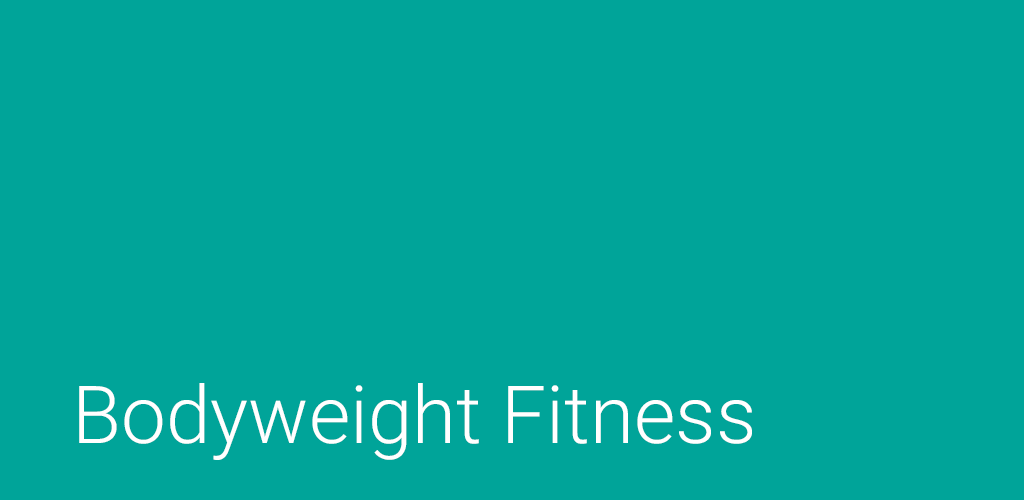
<style>
.page{position:relative;width:1024px;height:500px;background:#00a499}
.page>*{position:absolute;margin:0}
.t1{font:80px "Roboto-Light";color:#ffffff}
</style>
<div class="page">
<p class="t1" style="left:79px;top:383px;width:673px;height:77px">Bodyweight Fitness</p>
</div>
